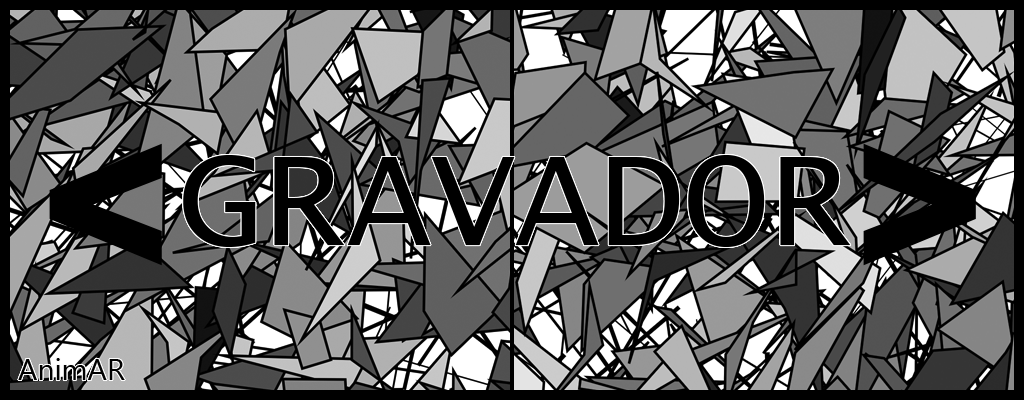
<style>
.page{position:relative;width:1024px;height:400px;background:#000000}
.page>*{position:absolute;margin:0}
.t1{font:200px "GillSans-UltraBold";color:#000000}
.t2{font:140px "LucidaConsole";color:#000000}
</style>
<div class="page">
<p class="t1" style="left:49px;top:143px;width:113px;height:123px">&lt;</p>
<p class="t1" style="left:863px;top:143px;width:113px;height:123px">&gt;</p>
<p class="t2" style="left:183px;top:155px;width:668px;height:92px">GRAVADOR</p>
</div>
